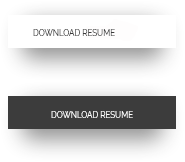
<style>
.page{position:relative;width:185px;height:162px;background:#ffffff}
.page>*{position:absolute;margin:0}
.t1{font:8px "Raleway-Regular";color:#3c3c3c}
.t2{font:8px "Raleway-Regular";color:#ffffff}
</style>
<div class="page">
<p class="t1" style="left:33px;top:29px;width:82px;height:7px">DOWNLOAD RESUME</p>
<p class="t2" style="left:51px;top:111px;width:82px;height:7px">DOWNLOAD RESUME</p>
</div>
